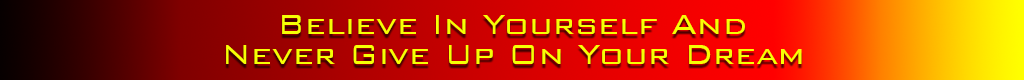
<style>
.page{position:relative;width:1024px;height:80px}
.page>*{position:absolute;margin:0}
.t1{font:36px/30px "BankGothicBT-Light";color:#f6ff04}
</style>
<div class="page">
<p class="t1" style="left:226px;top:15px;width:576px;height:49px;text-align:center">Believe In Yourself And<br>Never Give Up On Your Dream</p>
</div>
